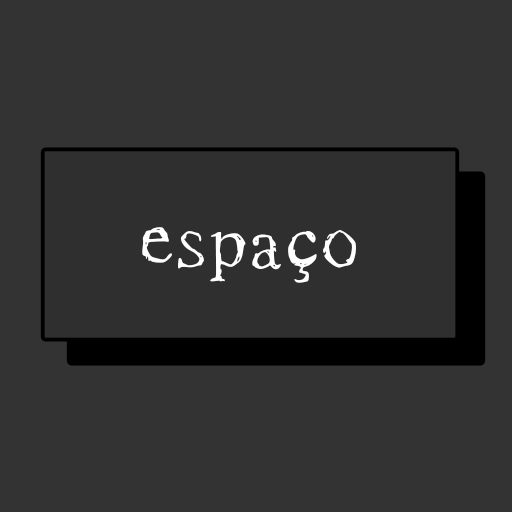
<style>
.page{position:relative;width:512px;height:512px;background:#333333}
.page>*{position:absolute;margin:0}
.t1{font:108.7px "Roman-New-Times";color:#ffffff}
</style>
<div class="page">
<p class="t1" style="left:142px;top:227px;width:214px;height:56px">espaço</p>
</div>
